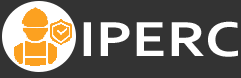
<style>
.page{position:relative;width:241px;height:78px;background:#333333}
.page>*{position:absolute;margin:0}
.t1{font:51.6px "Corbel-Bold";color:#ffffff;scale:1.18 1}
</style>
<div class="page">
<p class="t1" style="left:83px;top:21px;width:155px;height:36px">IPERC</p>
</div>
